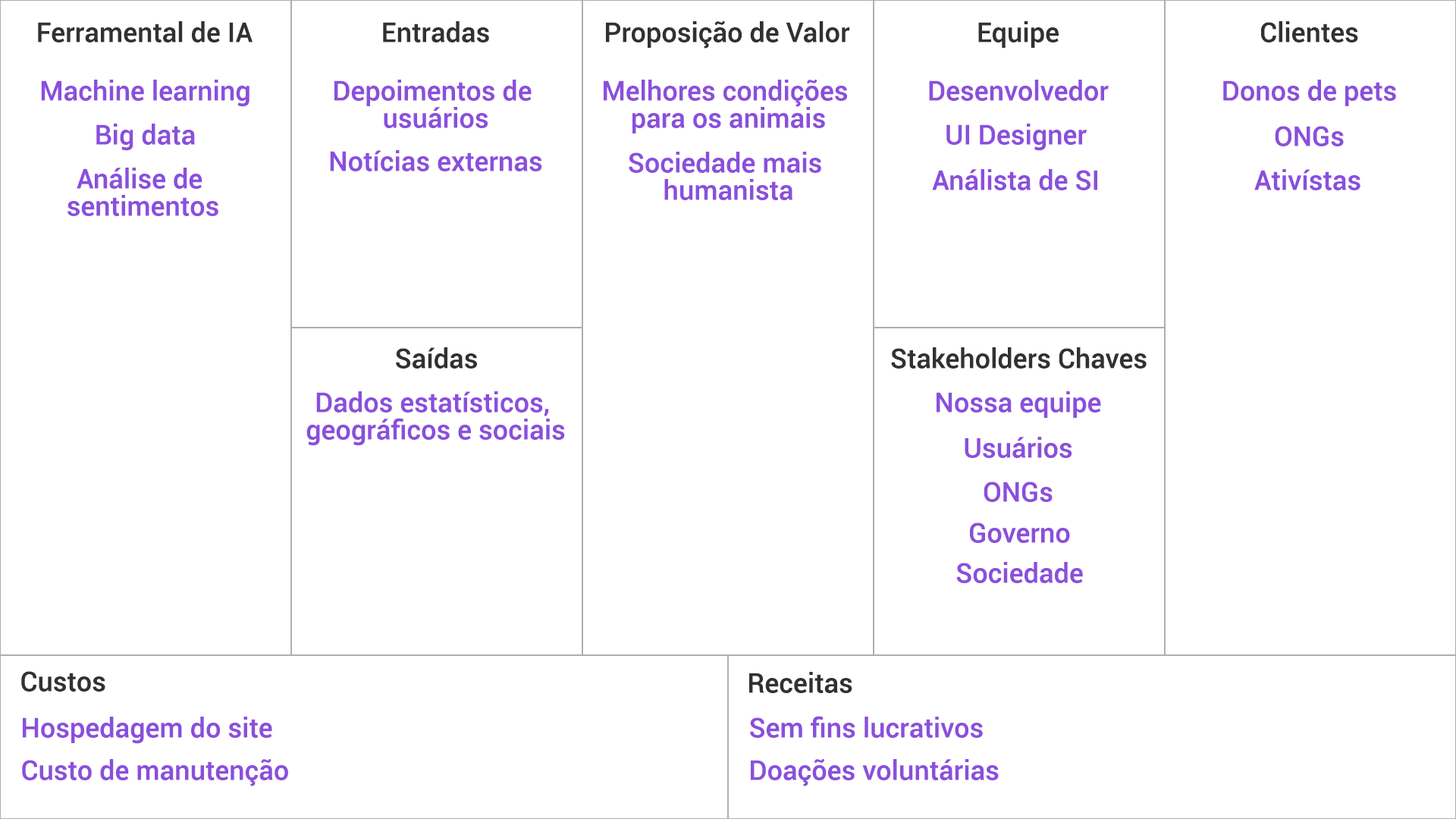
<style>
.page{position:relative;width:1456px;height:819px;background:#ffffff}
.page>*{position:absolute;margin:0}
.t1{font:27.3px "Roboto-Medium";color:#313131}
.t2{font:27.3px "Roboto-Medium";color:#8a4fdc}
.t3{font:27.3px/27.3px "Roboto-Medium";color:#8a4fdc}
</style>
<div class="page">
<p class="t1" style="left:38px;top:21px;width:215px;height:21px">Ferramental de IA</p>
<p class="t1" style="left:383px;top:21px;width:106px;height:21px">Entradas</p>
<p class="t1" style="left:606px;top:20px;width:244px;height:29px">Proposição de Valor</p>
<p class="t1" style="left:978px;top:21px;width:81px;height:27px">Equipe</p>
<p class="t1" style="left:1261px;top:21px;width:97px;height:21px">Clientes</p>
<p class="t2" style="left:41px;top:80px;width:208px;height:27px">Machine learning</p>
<p class="t3" style="left:334px;top:80px;width:198px;height:48px;text-align:center">Depoimentos de <br>usuários</p>
<p class="t3" style="left:604px;top:79px;width:243px;height:54px;text-align:center">Melhores condições <br>para os animais</p>
<p class="t2" style="left:929px;top:80px;width:180px;height:21px">Desenvolvedor</p>
<p class="t2" style="left:1223px;top:80px;width:173px;height:26px">Donos de pets</p>
<p class="t2" style="left:96px;top:124px;width:99px;height:27px">Big data</p>
<p class="t2" style="left:946px;top:124px;width:141px;height:27px">UI Designer</p>
<p class="t2" style="left:1275px;top:126px;width:69px;height:20px">ONGs</p>
<p class="t2" style="left:330px;top:150px;width:212px;height:21px">Notícias externas</p>
<p class="t3" style="left:629px;top:152px;width:192px;height:48px;text-align:center">Sociedade mais <br>humanista</p>
<p class="t3" style="left:67px;top:168px;width:151px;height:48px;text-align:center">Análise de <br>sentimentos</p>
<p class="t2" style="left:932px;top:169px;width:165px;height:21px">Análista de SI</p>
<p class="t2" style="left:1254px;top:169px;width:106px;height:21px">Ativístas</p>
<p class="t1" style="left:396px;top:347px;width:81px;height:22px">Saídas</p>
<p class="t1" style="left:891px;top:347px;width:256px;height:22px">Stakeholders Chaves</p>
<p class="t3" style="left:306px;top:391px;width:259px;height:55px;text-align:center">Dados estatísticos, <br>geográficos e sociais</p>
<p class="t2" style="left:937px;top:391px;width:164px;height:27px">Nossa equipe</p>
<p class="t2" style="left:965px;top:437px;width:107px;height:21px">Usuários</p>
<p class="t2" style="left:984px;top:482px;width:69px;height:20px">ONGs</p>
<p class="t2" style="left:970px;top:522px;width:100px;height:21px">Governo</p>
<p class="t2" style="left:956px;top:562px;width:127px;height:21px">Sociedade</p>
<p class="t1" style="left:21px;top:671px;width:84px;height:21px">Custos</p>
<p class="t1" style="left:749px;top:672px;width:103px;height:21px">Receitas</p>
<p class="t2" style="left:23px;top:717px;width:249px;height:27px">Hospedagem do site</p>
<p class="t2" style="left:750px;top:716px;width:233px;height:22px">Sem fins lucrativos</p>
<p class="t2" style="left:22px;top:758px;width:266px;height:28px">Custo de manutenção</p>
<p class="t2" style="left:751px;top:758px;width:248px;height:28px">Doações voluntárias</p>
</div>
